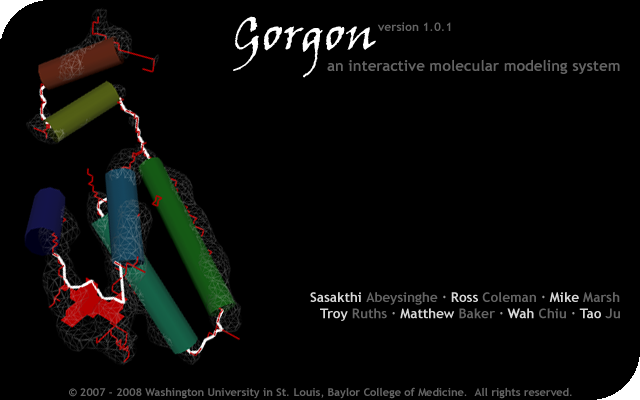
<style>
.page{position:relative;width:640px;height:400px;background:#000000}
.page>*{position:absolute;margin:0}
.t1{font:48px "VinerHandITC";color:#ffffff}
.t2{font:12px "TrebuchetMS-Bold";color:#636363}
.t3{font:15px "TrebuchetMS-Bold";color:#636363}
.t4{font:13.5px "TrebuchetMS-Bold";color:#636363}
.t5{font:13.5px "TrebuchetMS-Bold";color:#d7d7d7}
.t6{font:13.5px "TrebuchetMS-Bold";color:#959595}
.t7{font:11px "TrebuchetMS-Bold";color:#636363}
</style>
<div class="page">
<p class="t1" style="left:233px;top:16px;width:143px;height:62px">Gorgon</p>
<p class="t2" style="left:377px;top:22px;width:74px;height:9px">version 1.0.1</p>
<p class="t3" style="left:327px;top:59px;width:293px;height:15px">an interactive molecular modeling system</p>
<p class="t4" style="left:310px;top:292px;width:310px;height:29px;text-align:right"><span class="t5">Sasakthi </span>Abeysinghe <span class="t6">· </span><span class="t5">Ross </span>Coleman <span class="t6">· </span><span class="t5">Mike </span>Marsh <br><span class="t5">Troy </span>Ruths <span class="t6">· </span><span class="t5">Matthew </span>Baker <span class="t6">· </span><span class="t5">Wah </span>Chiu <span class="t6">· </span><span class="t5">Tao </span>Ju</p>
<p class="t7" style="left:69px;top:387px;width:503px;height:12px">© 2007 - 2008 Washington University in St. Louis, Baylor College of Medicine.  All rights reserved.</p>
</div>
